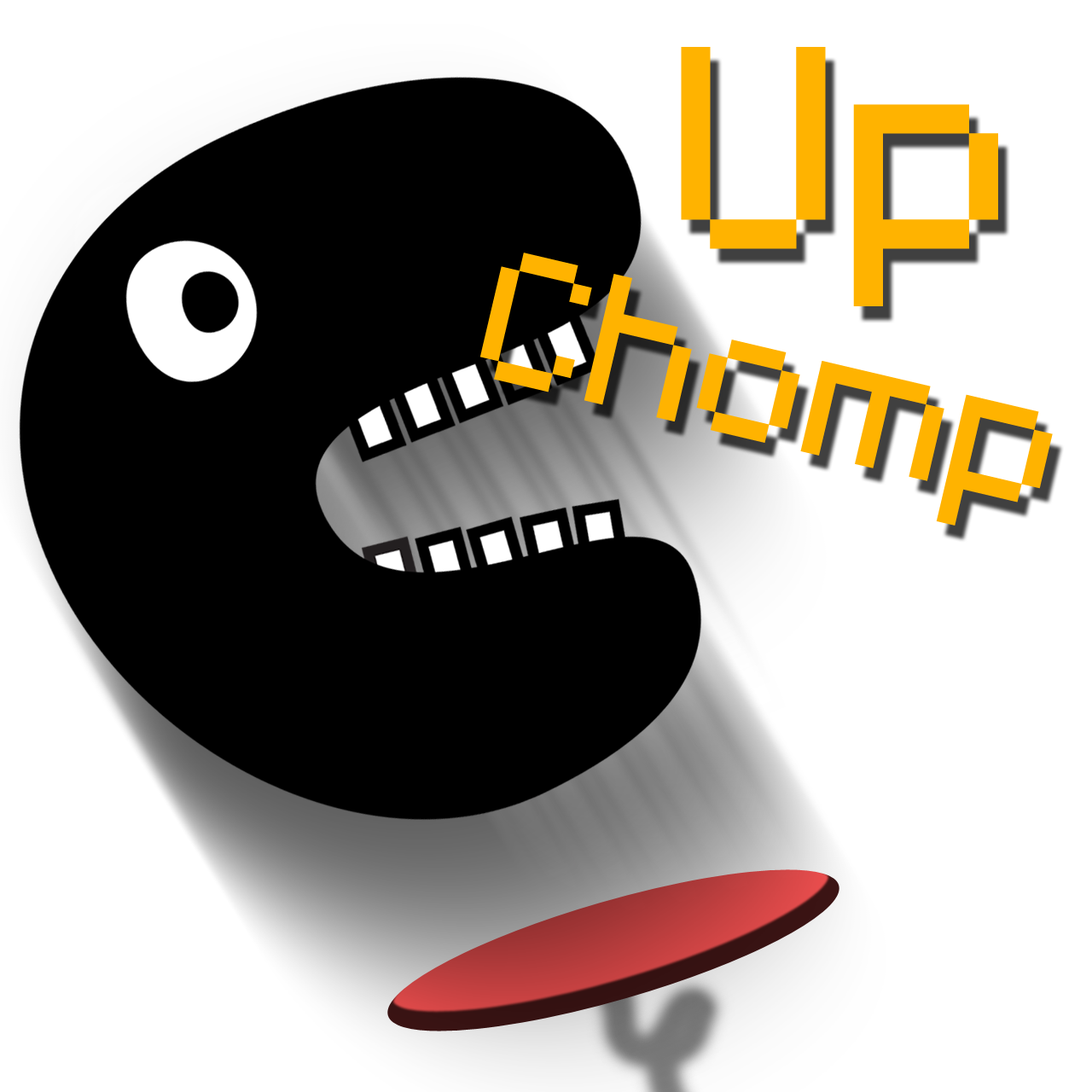
<style>
.page{position:relative;width:1092px;height:1092px;background:#ffffff}
.page>*{position:absolute;margin:0}
.t1{font:259.1px "Volter(Goldfish)-Regular";color:#ffb300}
.t2{font:166.8px "Volter(Goldfish)-Regular";color:#ffb300}
</style>
<div class="page">
<p class="t1" style="left:681px;top:47px;width:317px;height:259px">Up</p>
<p class="t2" style="left:479px;top:253px;width:574px;height:273px;rotate:13deg">Chomp</p>
</div>
